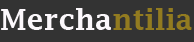
<style>
.page{position:relative;width:194px;height:42px;background:#333333}
.page>*{position:absolute;margin:0}
.t1{font:29.1px "LucidaFax-Demi";color:#fcf8fc}
.t2{font:29.1px "LucidaFax-Demi";color:#927b20}
</style>
<div class="page">
<p class="t1" style="left:1px;top:8px;width:191px;height:22px">Mercha<span class="t2">ntilia</span></p>
</div>
